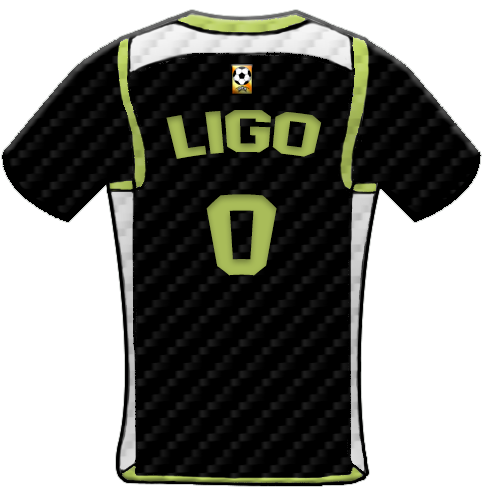
<style>
.page{position:relative;width:482px;height:494px;background:#ffffff}
.page>*{position:absolute;margin:0}
.t1{font:59.4px "AdidasHalfBlock2016";color:#a9bc59;scale:1.13 1}
.t2{font:113.8px "AdidasHalfBlock2016";color:#a9bc59}
</style>
<div class="page">
<p class="t1" style="left:166px;top:110px;width:156px;height:49px">Ligo</p>
<p class="t2" style="left:206px;top:194px;width:71px;height:82px">0</p>
</div>
